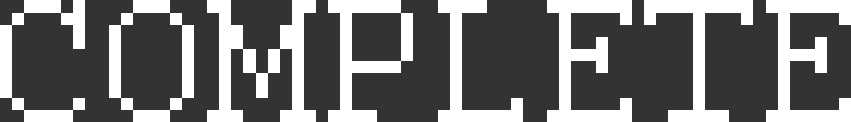
<style>
.page{position:relative;width:851px;height:122px;background:#333333}
.page>*{position:absolute;margin:0}
.t1{font:194.4px "Courier";color:#ffffff}
</style>
<div class="page">
<p class="t1" style="left:0px;top:0px;width:851px;height:122px">COMPLETE</p>
</div>
